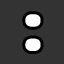
<style>
.page{position:relative;width:64px;height:64px;background:#333333}
.page>*{position:absolute;margin:0}
.t1{font:75.8px "DFLeiGaSo-W5-WIN-RKSJ-H";color:#ffffff;font-weight:bold}
</style>
<div class="page">
<p class="t1" style="left:25px;top:14px;width:16px;height:37px">:</p>
</div>
